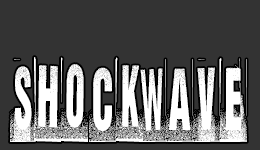
<style>
.page{position:relative;width:260px;height:150px;background:#333333}
.page>*{position:absolute;margin:0}
.t1{font:90.3px "ghettomarquee";color:#ffffff;scale:0.51 1}
</style>
<div class="page">
<p class="t1" style="left:10px;top:57px;width:237px;height:85px">shockwave</p>
</div>
